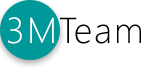
<style>
.page{position:relative;width:150px;height:70px;background:#ffffff}
.page>*{position:absolute;margin:0}
.t1{font:36px "SegoeUI-Light";letter-spacing:0.06em;color:#000000}
.t2{font:36px "SegoeUI-Light";letter-spacing:0.06em;color:#ffffff}
</style>
<div class="page">
<p class="t1" style="left:8px;top:17px;width:133px;height:27px"><span class="t2">3M</span>Team</p>
</div>
